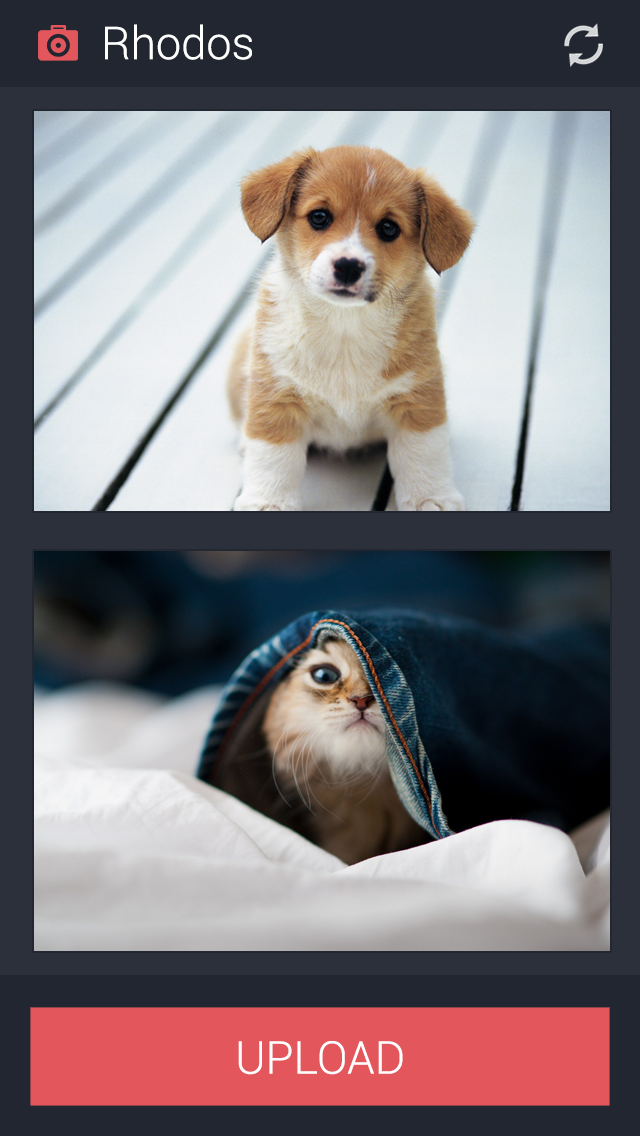
<style>
.page{position:relative;width:640px;height:1136px}
.page>*{position:absolute;margin:0}
.t1{font:45.3px "Roboto-Light";color:#ffffff}
</style>
<div class="page">
<p class="t1" style="left:105px;top:24px;width:147px;height:36px">Rhodos</p>
<p class="t1" style="left:238px;top:1041px;width:165px;height:34px">UPLOAD</p>
</div>
